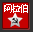
<style>
.page{position:relative;width:33px;height:32px;background:#c50000}
.page>*{position:absolute;margin:0}
.t1{font:10.4px "SimSun";letter-spacing:-0.25em;color:#ffffff}
</style>
<div class="page">
<p class="t1" style="left:4px;top:4px;width:24px;height:9px">阿拉伯</p>
</div>
